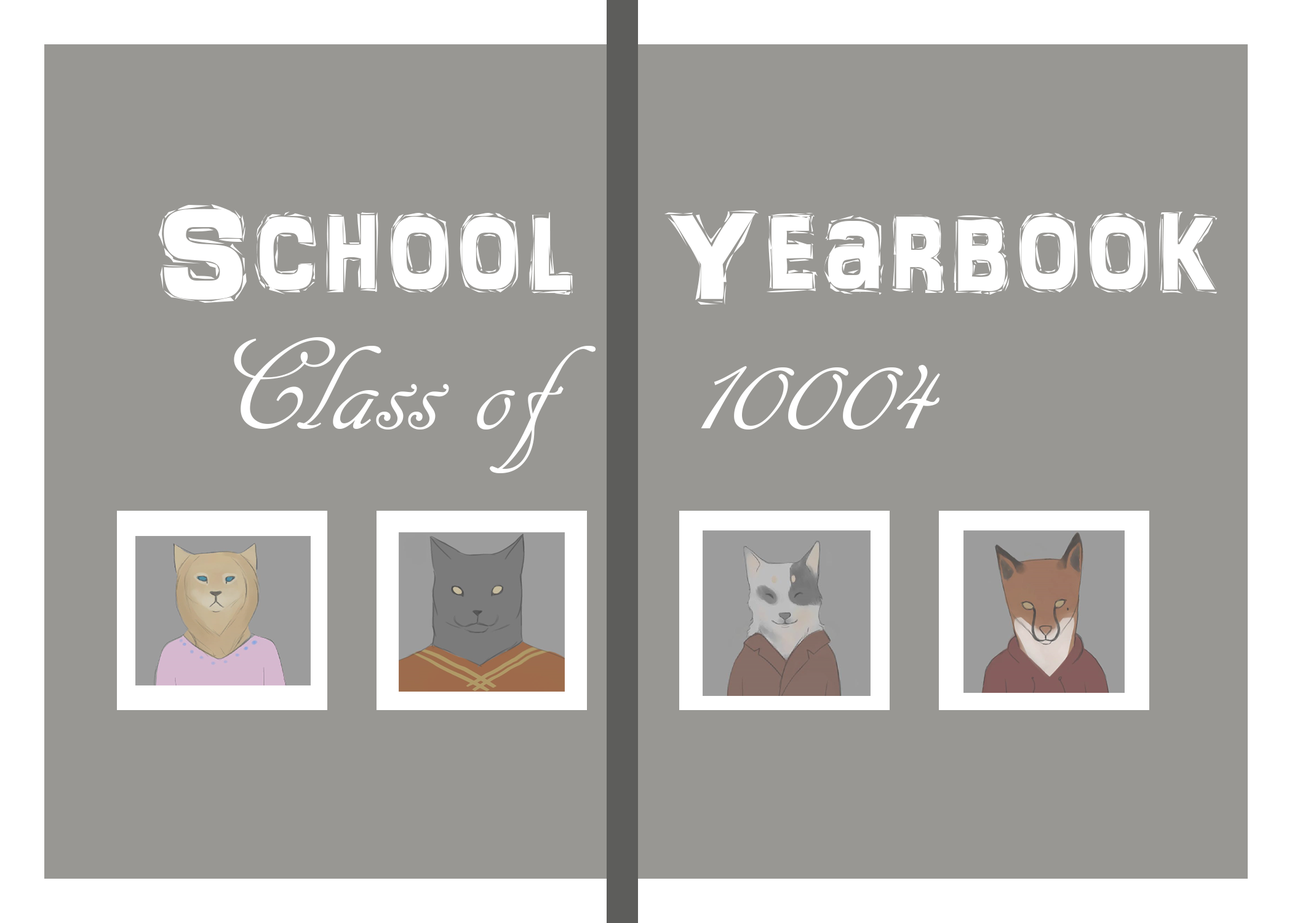
<style>
.page{position:relative;width:1292px;height:923px;background:#989793}
.page>*{position:absolute;margin:0}
.t1{font:138.5px "ARDARLING";color:#ffffff}
.t2{font:138.5px "ARDECODE";color:#ffffff}
</style>
<div class="page">
<p class="t1" style="left:158px;top:204px;width:1060px;height:101px">School  Yearbook</p>
<p class="t2" style="left:234px;top:337px;width:706px;height:136px">Class of    10004</p>
</div>
